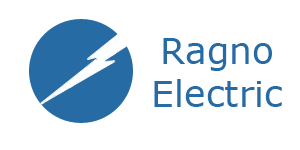
<style>
.page{position:relative;width:300px;height:150px;background:#ffffff}
.page>*{position:absolute;margin:0}
.t1{font:36px "Verdana";color:#276ba5}
</style>
<div class="page">
<p class="t1" style="left:154px;top:38px;width:128px;height:69px;text-align:center">Ragno<br>Electric</p>
</div>
